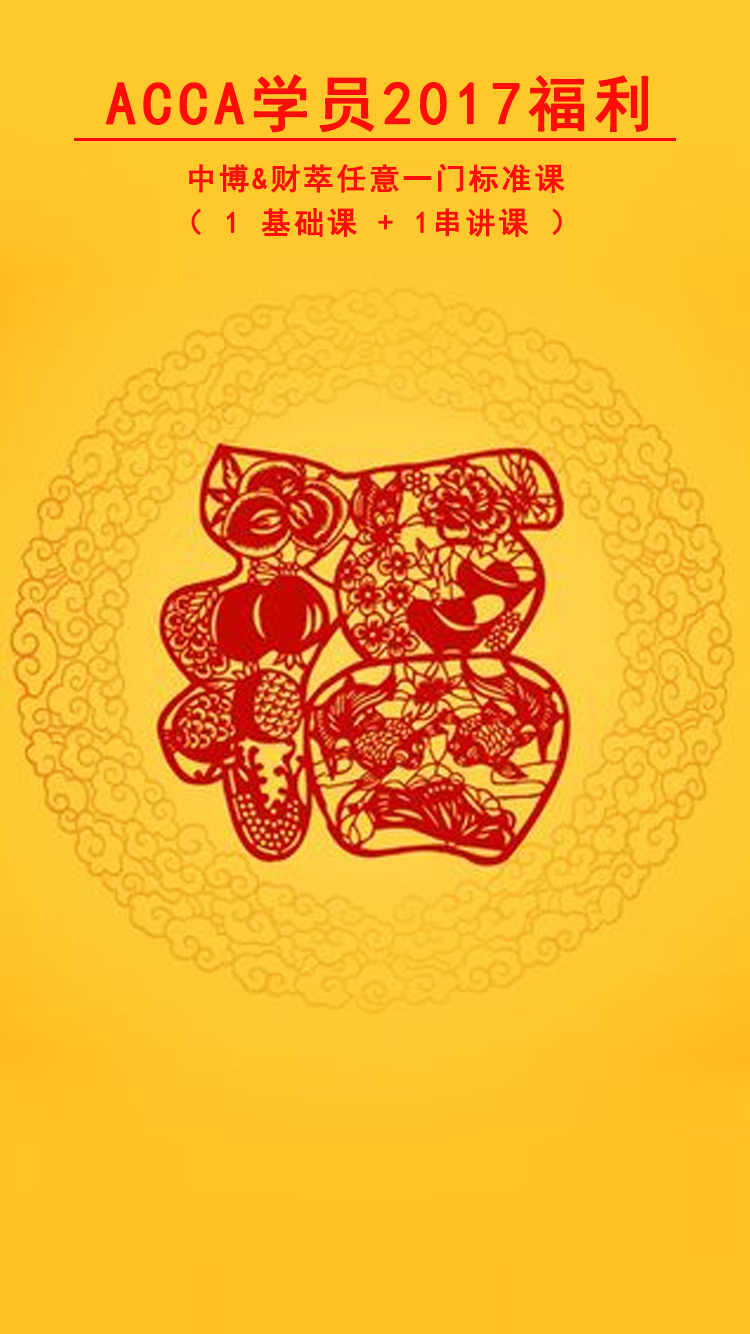
<style>
.page{position:relative;width:750px;height:1334px}
.page>*{position:absolute;margin:0}
.t1{font:60px "SimHei";letter-spacing:0.075em;color:#ff0d06;font-weight:bold}
.t2{font:30px "SimHei";letter-spacing:0.075em;color:#ff0d06;font-weight:bold}
</style>
<div class="page">
<p class="t1" style="left:105px;top:74px;width:544px;height:59px">ACCA学员2017福利</p>
<p class="t2" style="left:189px;top:164px;width:376px;height:29px">中博&amp;财萃任意一门标准课</p>
<p class="t2" style="left:191px;top:208px;width:371px;height:29px">（ 1 基础课 + 1串讲课 ）</p>
</div>
